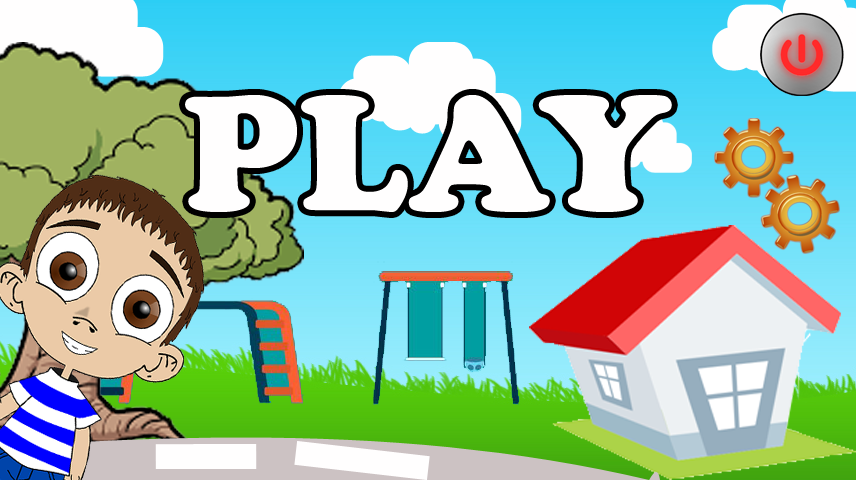
<style>
.page{position:relative;width:856px;height:480px}
.page>*{position:absolute;margin:0}
.t1{font:169.5px "CooperBlack";color:#fffefe}
</style>
<div class="page">
<p class="t1" style="left:185px;top:95px;width:487px;height:117px">PLAY</p>
</div>
